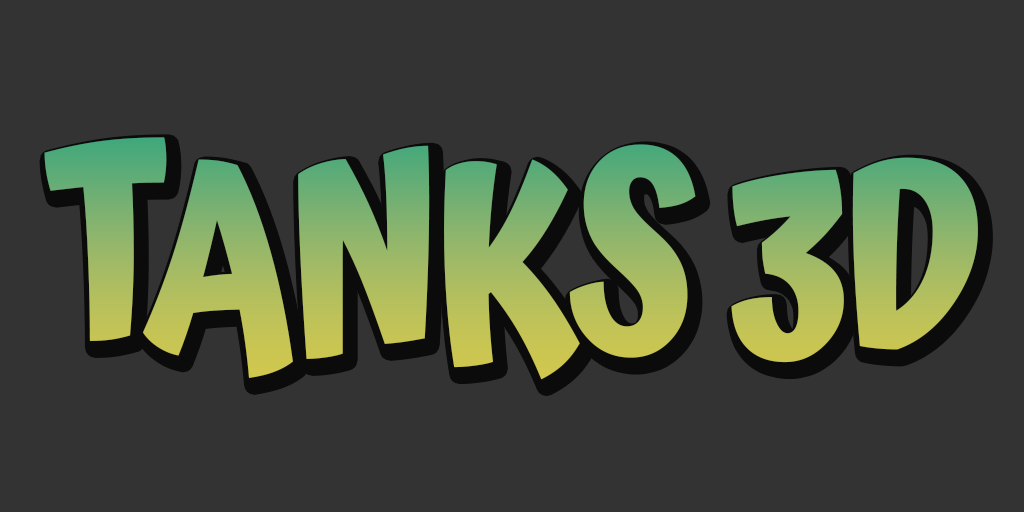
<style>
.page{position:relative;width:1024px;height:512px;background:#333333}
.page>*{position:absolute;margin:0}
.t1{font:264px "Atma-Bold";letter-spacing:-0.04em;scale:0.83 1}
</style>
<div class="page">
<p class="t1" style="left:44px;top:137px;width:934px;height:243px">TANKS 3D</p>
</div>
